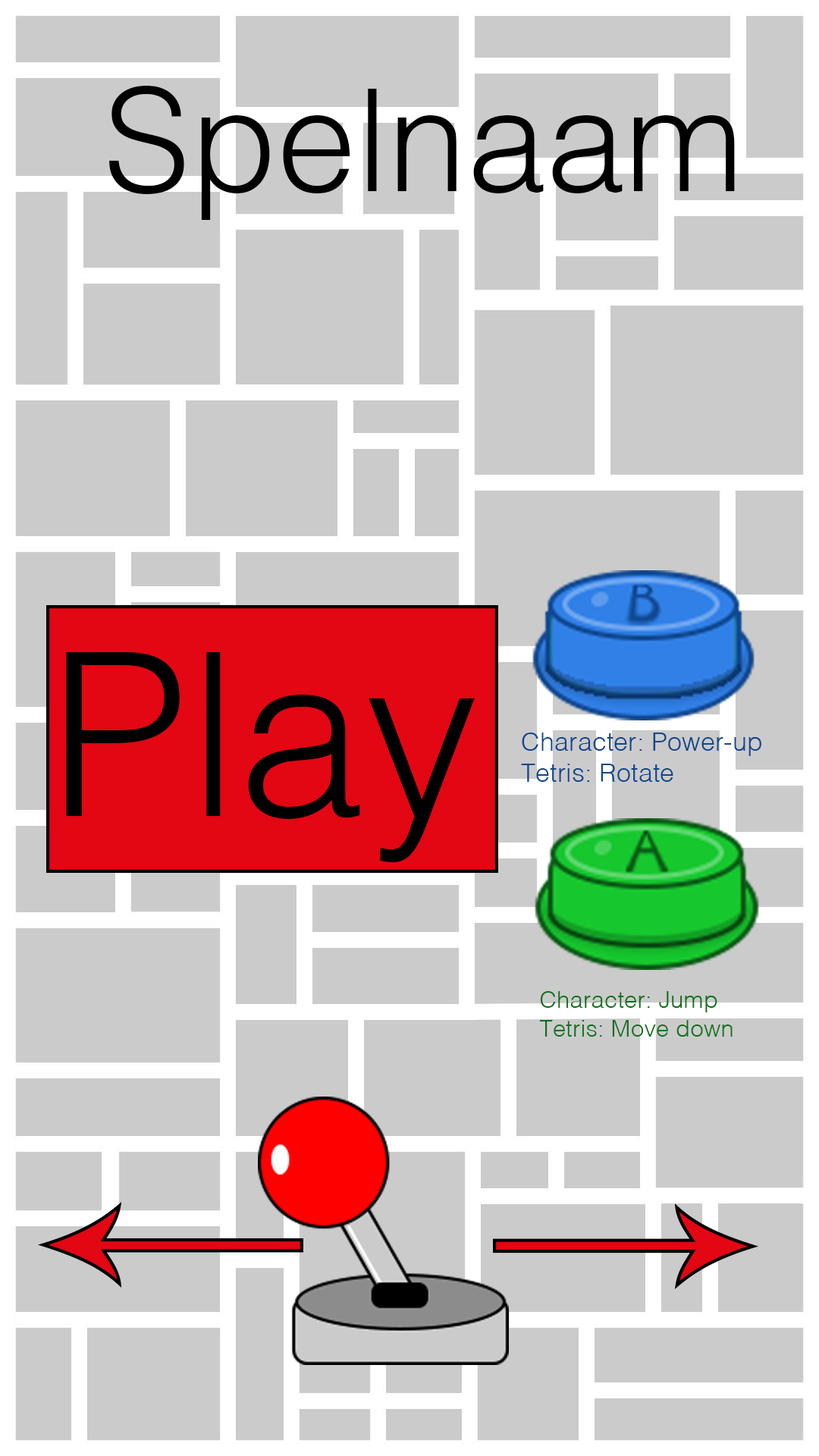
<style>
.page{position:relative;width:819px;height:1456px;background:#cbcbcb}
.page>*{position:absolute;margin:0}
.t1{font:142.2px "Helvetica-Light";color:#000000}
.t2{font:227.5px "Helvetica-Light";color:#000000}
.t3{font:26.1px "Helvetica-Light";color:#0f468e}
.t4{font:23.8px "Helvetica-Light";color:#0c721a}
</style>
<div class="page">
<p class="t1" style="left:109px;top:86px;width:626px;height:134px">Spelnaam</p>
<p class="t2" style="left:66px;top:652px;width:409px;height:210px">Play</p>
<p class="t3" style="left:521px;top:733px;width:240px;height:49px">Character: Power-up<br>Tetris: Rotate</p>
<p class="t4" style="left:539px;top:991px;width:194px;height:46px">Character: Jump<br>Tetris: Move down</p>
</div>
